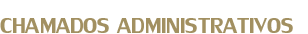
<style>
.page{position:relative;width:308px;height:34px;background:#ffffff}
.page>*{position:absolute;margin:0}
.t1{font:32px "LilyUPC";color:#a29061}
</style>
<div class="page">
<p class="t1" style="left:0px;top:18px;width:293px;height:16px">CHAMADOS ADMINISTRATIVOS</p>
</div>
